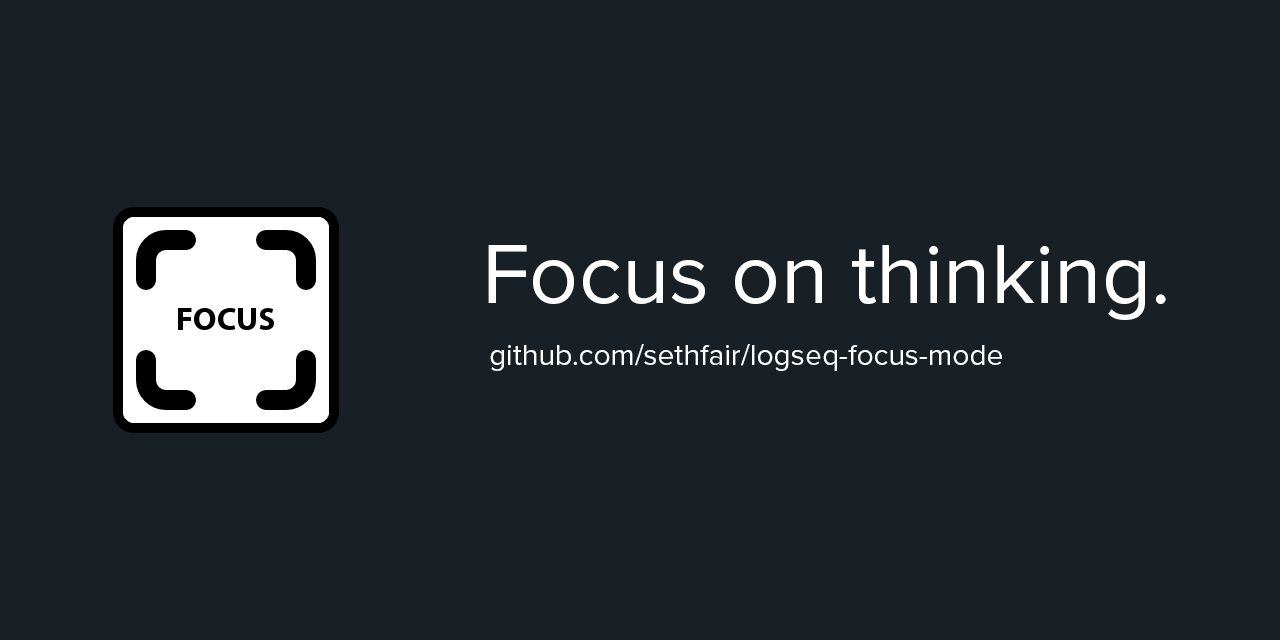
<style>
.page{position:relative;width:1280px;height:640px;background:#182026}
.page>*{position:absolute;margin:0}
.t1{font:86.3px "ProximaNova-Regular";color:#ffffff}
.t2{font:30px "ProximaNova-Regular";color:#ffffff}
</style>
<div class="page">
<p class="t1" style="left:488px;top:245px;width:678px;height:75px">Focus on thinking.</p>
<p class="t2" style="left:490px;top:344px;width:512px;height:27px">github.com/sethfair/logseq-focus-mode</p>
</div>
